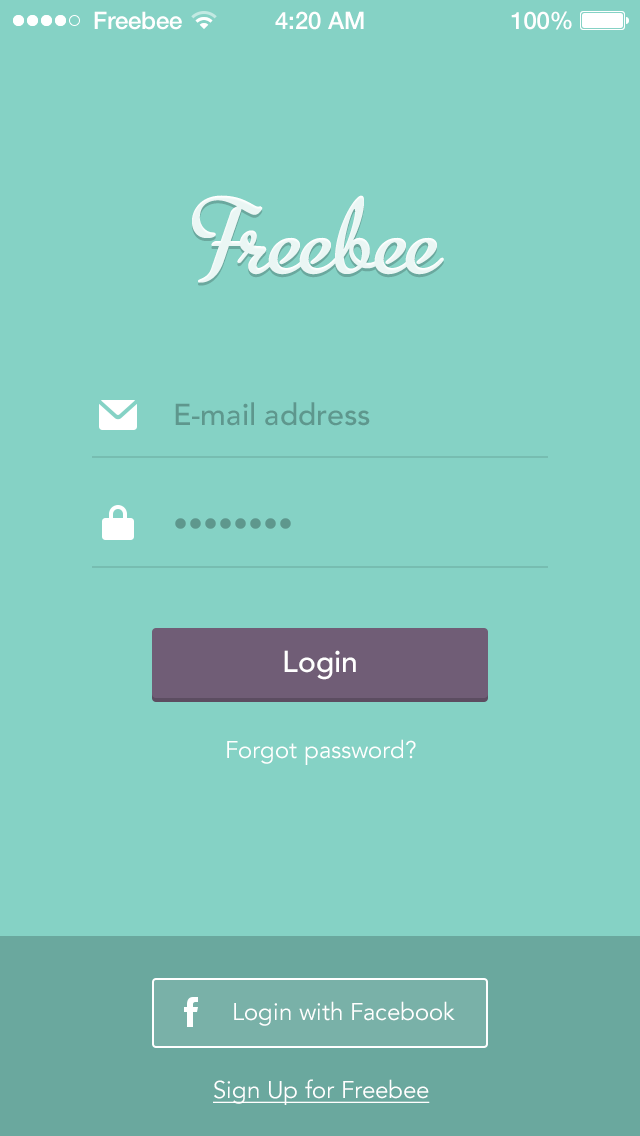
<style>
.page{position:relative;width:640px;height:1136px;background:#85d2c5}
.page>*{position:absolute;margin:0}
.t1{font:24px "HelveticaNeue-Medium";color:#ffffff}
.t2{font:120px "MetroScript";color:#ffffff}
.t3{font:30px "Avenir-Medium";color:#5e978d}
.t4{font:30px "Avenir-Medium";color:#ffffff}
.t5{font:24px "Avenir-Book";color:#ffffff}
.t6{font:24px "Avenir-Book";color:#ffffff;text-decoration:underline}
</style>
<div class="page">
<p class="t1" style="left:94px;top:11px;width:88px;height:19px">Freebee</p>
<p class="t1" style="left:275px;top:11px;width:89px;height:19px">4:20 AM</p>
<p class="t1" style="left:511px;top:11px;width:61px;height:19px">100%</p>
<p class="t2" style="left:192px;top:195px;width:252px;height:88px">Freebee</p>
<p class="t3" style="left:175px;top:402px;width:195px;height:24px">E-mail address</p>
<p class="t3" style="left:175px;top:518px;width:116px;height:11px">••••••••</p>
<p class="t4" style="left:284px;top:650px;width:72px;height:30px">Login</p>
<p class="t5" style="left:227px;top:739px;width:189px;height:26px">Forgot password?</p>
<p class="t5" style="left:234px;top:1001px;width:221px;height:25px">Login with Facebook</p>
<p class="t6" style="left:213px;top:1079px;width:217px;height:26px">Sign Up for Freebee</p>
</div>
